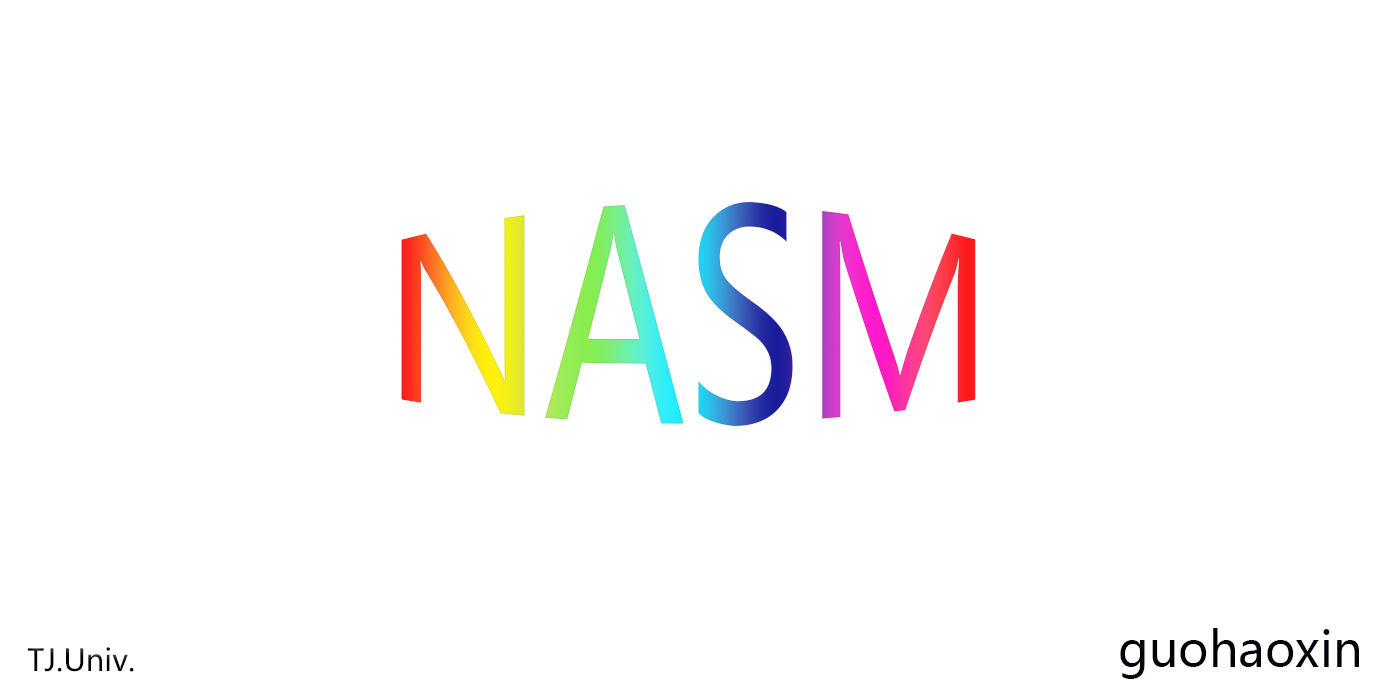
<style>
.page{position:relative;width:1376px;height:683px;background:#ffffff}
.page>*{position:absolute;margin:0}
.t1{font:200px "MicrosoftYaHei"}
.t2{font:48px "MicrosoftYaHei";color:#01030a}
.t3{font:30px "MicrosoftYaHei";color:#000000}
</style>
<div class="page">
<p class="t1" style="left:401px;top:202px;width:575px;height:224px">NASM</p>
<p class="t2" style="left:1120px;top:628px;width:239px;height:51px">guohaoxin</p>
<p class="t3" style="left:27px;top:647px;width:107px;height:25px">TJ.Univ.</p>
</div>
